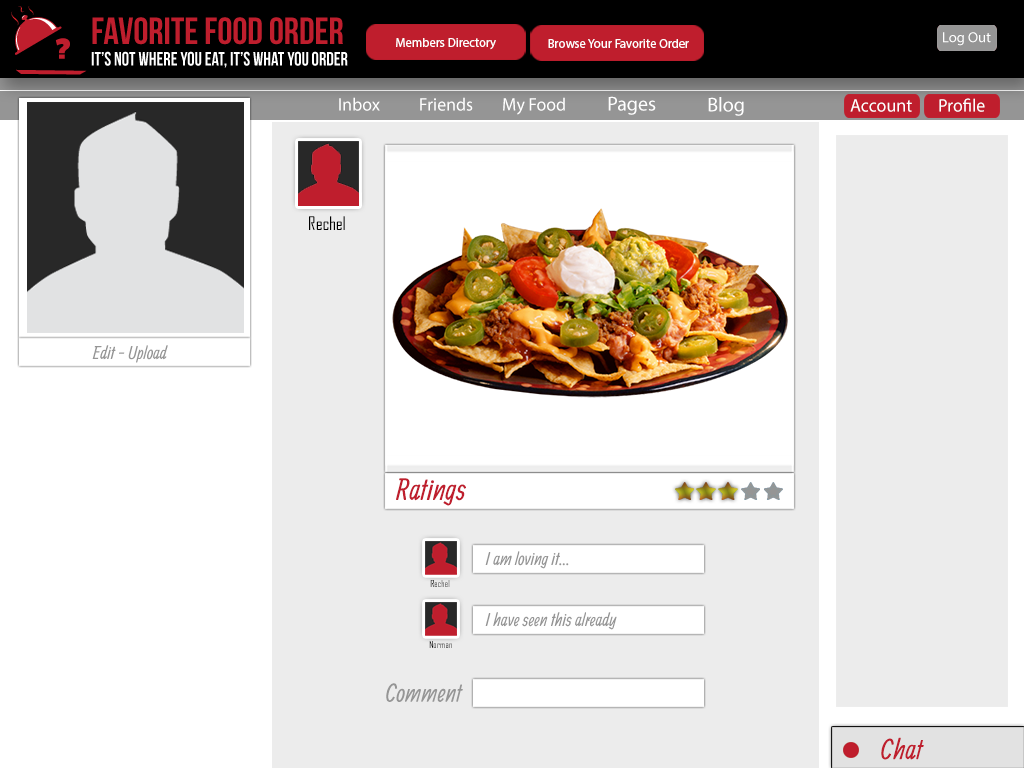
<style>
.page{position:relative;width:1024px;height:768px;background:#ffffff}
.page>*{position:absolute;margin:0}
.t1{font:12.7px "MyriadPro-Regular";color:#ffffff}
.t2{font:14.7px "MyriadPro-Regular";color:#ffffff}
.t3{font:18px "MyriadPro-Regular";color:#ffffff}
.t4{font:20.3px "MyriadPro-Regular";color:#ffffff}
.t5{font:18px "AgencyFB-Reg";color:#000000}
.t6{font:18px "Allan-Regular";color:#959595}
.t7{font:30px "Allan-Regular";color:#bf1e2d}
.t8{font:9.3px "AgencyFB-Reg"}
.t9{font:9.3px "AgencyFB-Reg";color:#000000}
.t10{font:25.3px "Allan-Regular";color:#959595}
.t11{font:28.1px "Allan-Regular";color:#bf1e2d}
</style>
<div class="page">
<p class="t1" style="left:396px;top:38px;width:100px;height:12px">Members Directory</p>
<p class="t1" style="left:548px;top:39px;width:141px;height:9px">Browse Your Favorite Order</p>
<p class="t2" style="left:943px;top:32px;width:48px;height:14px">Log Out</p>
<p class="t3" style="left:339px;top:97px;width:41px;height:14px">Inbox</p>
<p class="t3" style="left:420px;top:97px;width:53px;height:14px">Friends</p>
<p class="t3" style="left:503px;top:97px;width:62px;height:18px">My Food</p>
<p class="t4" style="left:608px;top:96px;width:48px;height:19px">Pages</p>
<p class="t4" style="left:708px;top:97px;width:36px;height:19px">Blog</p>
<p class="t3" style="left:850px;top:99px;width:62px;height:13px">Account</p>
<p class="t3" style="left:939px;top:98px;width:46px;height:14px">Profile</p>
<p class="t5" style="left:309px;top:216px;width:36px;height:14px">Rechel</p>
<p class="t6" style="left:92px;top:345px;width:76px;height:18px">Edit - Upload</p>
<p class="t7" style="left:396px;top:478px;width:70px;height:28px">Ratings</p>
<p class="t6" style="left:485px;top:551px;width:84px;height:18px">I am loving it...</p>
<p class="t8" style="left:430px;top:580px;width:20px;height:7px">Rechel</p>
<p class="t6" style="left:485px;top:612px;width:132px;height:18px">I have seen this already</p>
<p class="t9" style="left:429px;top:641px;width:23px;height:7px">Norman</p>
<p class="t10" style="left:386px;top:683px;width:77px;height:19px">Comment</p>
<p class="t11" style="left:881px;top:737px;width:43px;height:23px">Chat</p>
</div>
